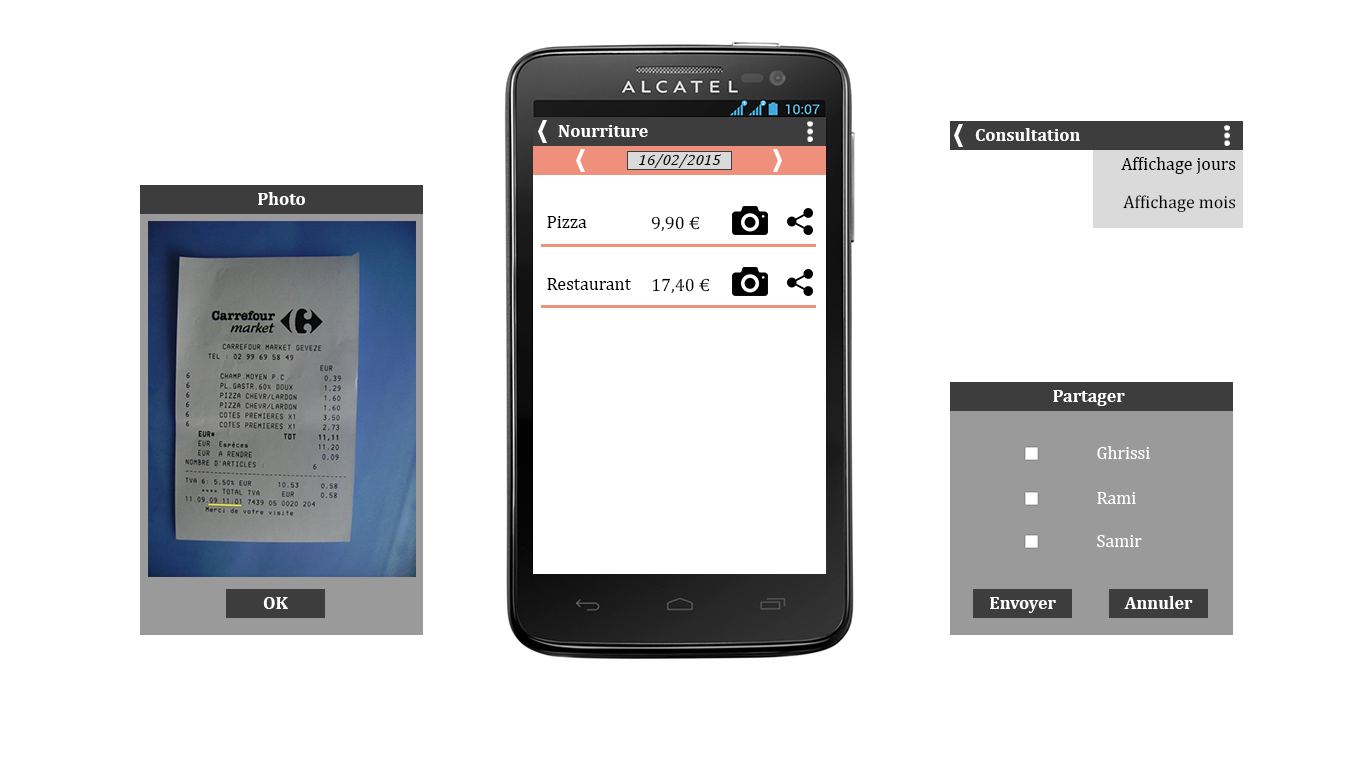
<style>
.page{position:relative;width:1366px;height:768px;background:#ffffff}
.page>*{position:absolute;margin:0}
.t1{font:18px "Cambria-Bold";color:#ffffff}
.t2{font:16px "Cambria-Italic";color:#000000}
.t3{font:18px "Cambria";color:#000000}
.t4{font:18px "Cambria";color:#ffffff}
</style>
<div class="page">
<p class="t1" style="left:558px;top:125px;width:90px;height:12px">Nourriture</p>
<p class="t1" style="left:975px;top:128px;width:105px;height:13px">Consultation</p>
<p class="t2" style="left:639px;top:154px;width:82px;height:14px">16/02/2015</p>
<p class="t3" style="left:1121px;top:157px;width:115px;height:17px">Affichage jours</p>
<p class="t1" style="left:258px;top:192px;width:47px;height:13px">Photo</p>
<p class="t3" style="left:1123px;top:195px;width:113px;height:18px">Affichage mois</p>
<p class="t3" style="left:547px;top:216px;width:40px;height:12px">Pizza</p>
<p class="t3" style="left:651px;top:216px;width:49px;height:16px">9,90 €</p>
<p class="t3" style="left:547px;top:278px;width:84px;height:12px">Restaurant</p>
<p class="t3" style="left:652px;top:278px;width:58px;height:16px">17,40 €</p>
<p class="t1" style="left:1053px;top:390px;width:72px;height:16px">Partager</p>
<p class="t4" style="left:1097px;top:446px;width:53px;height:13px">Ghrissi</p>
<p class="t4" style="left:1097px;top:492px;width:39px;height:12px">Rami</p>
<p class="t4" style="left:1097px;top:535px;width:45px;height:12px">Samir</p>
<p class="t1" style="left:263px;top:597px;width:25px;height:12px">OK</p>
<p class="t1" style="left:990px;top:597px;width:66px;height:16px">Envoyer</p>
<p class="t1" style="left:1124px;top:596px;width:69px;height:13px">Annuler</p>
</div>
